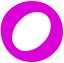
<style>
.page{position:relative;width:64px;height:63px;background:#ffffff}
.page>*{position:absolute;margin:0}
.t1{font:150px "SutonnyMJBold";color:#da00d7}
</style>
<div class="page">
<p class="t1" style="left:0px;top:1px;width:63px;height:61px">0</p>
</div>
